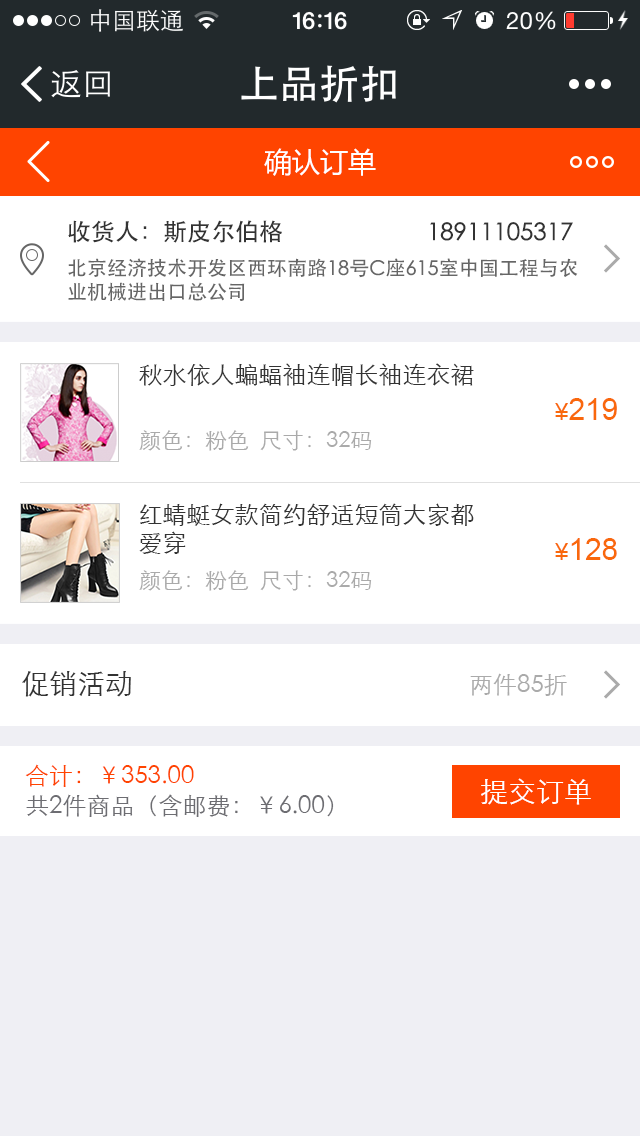
<style>
.page{position:relative;width:640px;height:1136px;background:#ffffff}
.page>*{position:absolute;margin:0}
.t1{font:28px "MicrosoftYaHei";color:#ffffff}
.t2{font:24px "STHeiti";color:#333333}
.t3{font:20px/24px "STHeiti";color:#666666}
.t4{font:24px "STXihei";color:#333333}
.t5{font:30px "ArialMT";color:#f9680c}
.t6{font:24px "ArialMT";color:#f9680c}
.t7{font:22px "STXihei";color:#aaaaaa}
.t8{font:24px/28px "STXihei";color:#333333}
.t9{font:28px "STXihei";color:#333333}
.t10{font:24px "STXihei";color:#aaaaaa}
.t11{font:24px/30px "STXihei";color:#6d6d72}
.t12{font:24px/30px "STXihei";color:#ff4400}
.t13{font:28px "STXihei";color:#ffffff}
</style>
<div class="page">
<p class="t1" style="left:264px;top:148px;width:112px;height:28px">确认订单</p>
<p class="t2" style="left:68px;top:220px;width:505px;height:23px">收货人：斯皮尔伯格                        18911105317</p>
<p class="t3" style="left:68px;top:258px;width:510px;height:43px">北京经济技术开发区西环南路18号C座615室中国工程与农<br>业机械进出口总公司</p>
<p class="t4" style="left:139px;top:363px;width:335px;height:23px">秋水依人蝙蝠袖连帽长袖连衣裙</p>
<p class="t5" style="left:555px;top:398px;width:62px;height:22px"><span class="t6">¥</span>219</p>
<p class="t7" style="left:139px;top:430px;width:233px;height:21px">颜色：粉色  尺寸：32码</p>
<p class="t8" style="left:139px;top:503px;width:335px;height:51px">红蜻蜓女款简约舒适短筒大家都<br>爱穿</p>
<p class="t5" style="left:555px;top:538px;width:62px;height:22px"><span class="t6">¥</span>128</p>
<p class="t7" style="left:139px;top:570px;width:233px;height:21px">颜色：粉色  尺寸：32码</p>
<p class="t9" style="left:22px;top:671px;width:109px;height:26px">促销活动</p>
<p class="t10" style="left:470px;top:673px;width:97px;height:23px">两件85折</p>
<p class="t11" style="left:25px;top:764px;width:309px;height:53px"><span class="t12">合计：￥353.00<br></span>共2件商品（含邮费：￥6.00）</p>
<p class="t13" style="left:481px;top:778px;width:110px;height:27px">提交订单</p>
</div>
